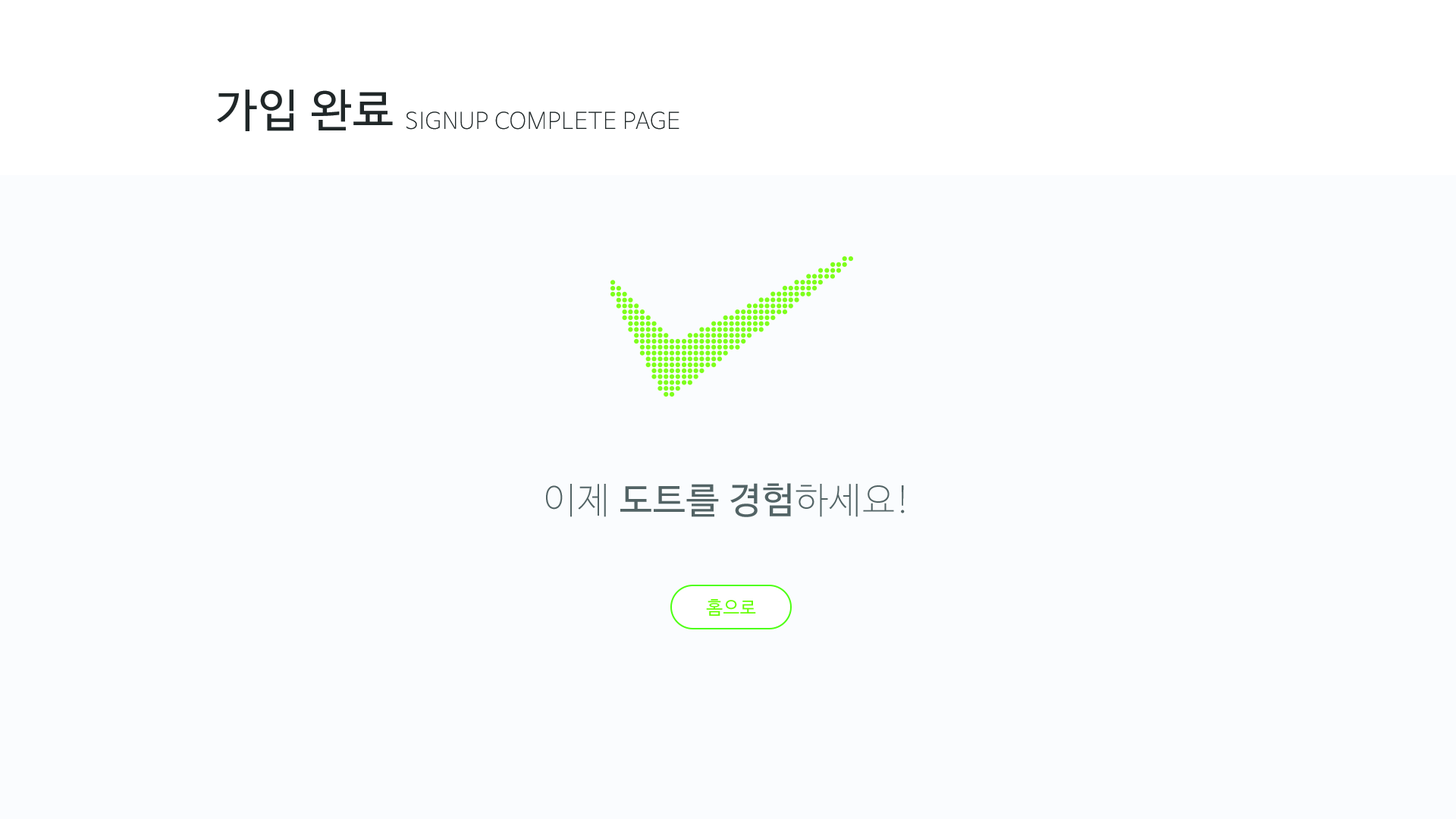
<style>
.page{position:relative;width:1456px;height:819px;background:#fafcfe}
.page>*{position:absolute;margin:0}
.t1{font:45.5px "NanumBarunGothic";letter-spacing:0.025em;color:#202728}
.t2{font:22.7px "NanumBarunGothicUltraLight";letter-spacing:0.025em;color:#202728}
.t3{font:36.1px "NanumBarunGothic";letter-spacing:0.025em;color:#526364}
.t4{font:36.1px "NanumBarunGothicUltraLight";letter-spacing:0.025em;color:#526364}
.t5{font:18.2px "NanumBarunGothic";letter-spacing:0.025em;color:#64ff00}
</style>
<div class="page">
<p class="t1" style="left:217px;top:89px;width:176px;height:42px">가입 완료</p>
<p class="t2" style="left:406px;top:111px;width:273px;height:19px">SIGNUP COMPLETE PAGE</p>
<p class="t3" style="left:546px;top:483px;width:359px;height:34px"><span class="t4">이제</span> 도트를 경험<span class="t4">하세요!</span></p>
<p class="t5" style="left:706px;top:599px;width:50px;height:17px">홈으로</p>
</div>
